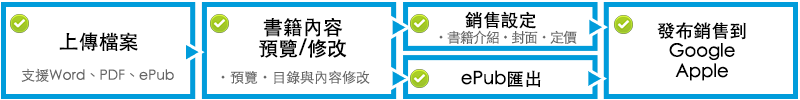
<style>
.page{position:relative;width:800px;height:100px;background:#ffffff}
.page>*{position:absolute;margin:0}
.t1{font:18px "STHeitiTC-Medium";color:#000000}
.t2{font:20px/21.1px "STHeitiTC-Medium";color:#000000}
.t3{font:14px "STHeitiTC-Light";letter-spacing:-0.08em;color:#666666}
.t4{font:14px "KozGoPr6N-Regular";letter-spacing:-0.08em;color:#666666}
.t5{font:18px/20.5px "STHeitiTC-Medium";color:#000000}
.t6{font:20px "STHeitiTC-Medium";color:#000000}
.t7{font:14px "STHeitiTC-Light";color:#666666}
.t8{font:14px "KozGoPr6N-Regular";color:#666666}
</style>
<div class="page">
<p class="t1" style="left:465px;top:11px;width:71px;height:18px">銷售設定</p>
<p class="t2" style="left:259px;top:18px;width:88px;height:40px;text-align:center">書籍內容<br>預覽/修改</p>
<p class="t3" style="left:439px;top:30px;width:138px;height:14px"><span class="t4">・</span>書籍介紹<span class="t4">・</span>封面<span class="t4">・</span>定價</p>
<p class="t5" style="left:657px;top:22px;width:89px;height:59px;text-align:center">發布銷售到<br>Google<br>Apple</p>
<p class="t6" style="left:59px;top:32px;width:79px;height:19px">上傳檔案</p>
<p class="t7" style="left:21px;top:68px;width:153px;height:14px">支援Word、PDF、ePub</p>
<p class="t7" style="left:221px;top:70px;width:149px;height:14px"><span class="t8">・</span>預覽<span class="t8">・</span>目錄與內容修改</p>
<p class="t1" style="left:461px;top:70px;width:80px;height:17px">ePub匯出</p>
</div>
